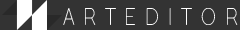
<style>
.page{position:relative;width:240px;height:30px;background:#333333}
.page>*{position:absolute;margin:0}
.t1{font:24px "FullSansLC-10Thin";color:#ffffff;scale:0.77 1}
</style>
<div class="page">
<p class="t1" style="left:63px;top:8px;width:175px;height:17px">A  R  T  E  D  I  T  O  R</p>
</div>
